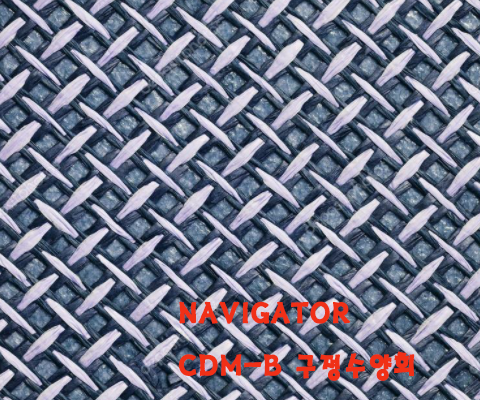
<style>
.page{position:relative;width:480px;height:400px}
.page>*{position:absolute;margin:0}
.t1{font:30px "HaanSaleB";color:#f03017;font-weight:bold}
</style>
<div class="page">
<p class="t1" style="left:178px;top:301px;width:237px;height:80px">NAVIGATOR <br>CDM-B 구정수양회</p>
</div>
